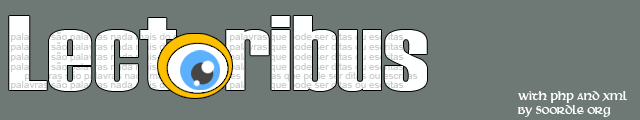
<style>
.page{position:relative;width:640px;height:120px;background:#6e7975}
.page>*{position:absolute;margin:0}
.t1{font:105px "Haettenschweiler";color:#feffff;scale:1.23 1}
.t2{font:14px/14px "Martel";color:#ffffff}
</style>
<div class="page">
<p class="t1" style="left:9px;top:16px;width:418px;height:75px">Lect  ribus</p>
<p class="t2" style="left:518px;top:91px;width:110px;height:26px">with php and xml<br>by Soordle org.</p>
</div>
